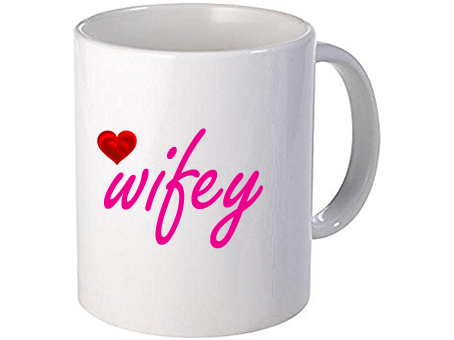
<style>
.page{position:relative;width:454px;height:340px;background:#ffffff}
.page>*{position:absolute;margin:0}
.t1{font:131px "FreestyleScript-Regular";color:#ec008c;scale:0.88 1}
</style>
<div class="page">
<p class="t1" style="left:104px;top:128px;width:159px;height:121px">wifey</p>
</div>
